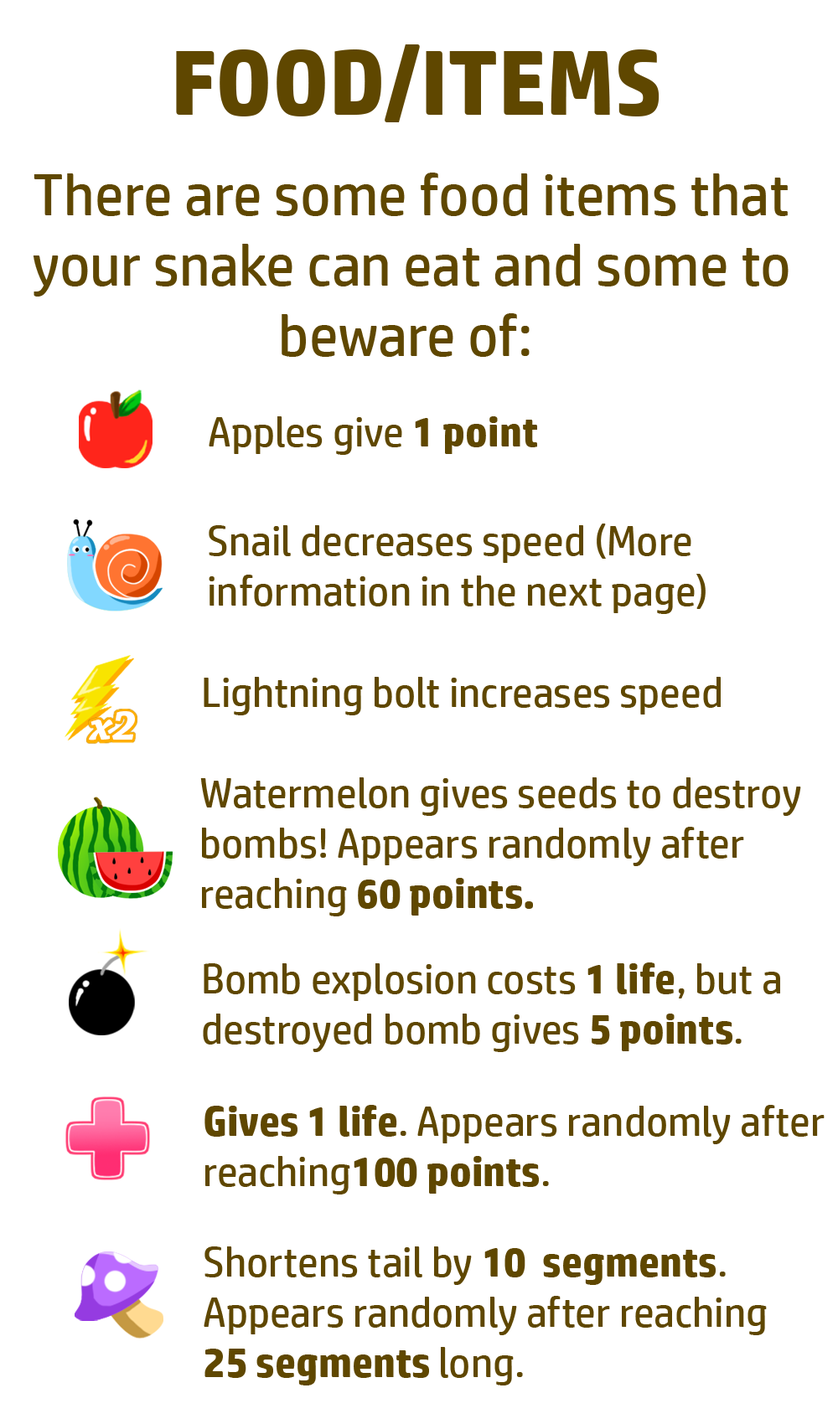
<style>
.page{position:relative;width:838px;height:1424px;background:#ffffff}
.page>*{position:absolute;margin:0}
.t1{font:92.1px "HPSimplified-Bold";color:#5f4700}
.t2{font:58.6px "HPSimplified-Regular";color:#5f4700}
.t3{font:41.9px "HPSimplified-Regular";color:#5f4700}
.t4{font:41.9px "HPSimplified-Bold";color:#5f4700}
.t5{font:44.4px "ChaparralPro-BoldIt";color:#ffffff}
</style>
<div class="page">
<p class="t1" style="left:176px;top:44px;width:483px;height:78px">FOOD/ITEMS</p>
<p class="t2" style="left:33px;top:173px;width:755px;height:184px;text-align:center">There are some food items that<br>your snake can eat and some to<br>beware of:</p>
<p class="t3" style="left:209px;top:416px;width:328px;height:39px">Apples give <span class="t4">1 point</span></p>
<p class="t3" style="left:209px;top:523px;width:496px;height:91px">Snail decreases speed (More<br>information in the next page)</p>
<p class="t3" style="left:204px;top:677px;width:516px;height:38px">Lightning bolt increases speed</p>
<p class="t5" style="left:89px;top:711px;width:46px;height:29px">x2</p>
<p class="t3" style="left:200px;top:777px;width:601px;height:139px">Watermelon gives seeds to destroy <br>bombs! Appears randomly after<br>reaching <span class="t4">60 points.</span></p>
<p class="t3" style="left:203px;top:962px;width:577px;height:90px">Bomb explosion costs <span class="t4">1 life</span>, but a<br>destroyed bomb gives <span class="t4">5 points</span>.</p>
<p class="t3" style="left:204px;top:1105px;width:620px;height:89px"><span class="t4">Gives 1 life</span>. Appears randomly after<br>reaching<span class="t4">100 points</span>.</p>
<p class="t3" style="left:204px;top:1246px;width:562px;height:139px">Shortens tail by <span class="t4">10  segments</span>.<br>Appears randomly after reaching<br><span class="t4">25 segments </span>long.</p>
</div>
